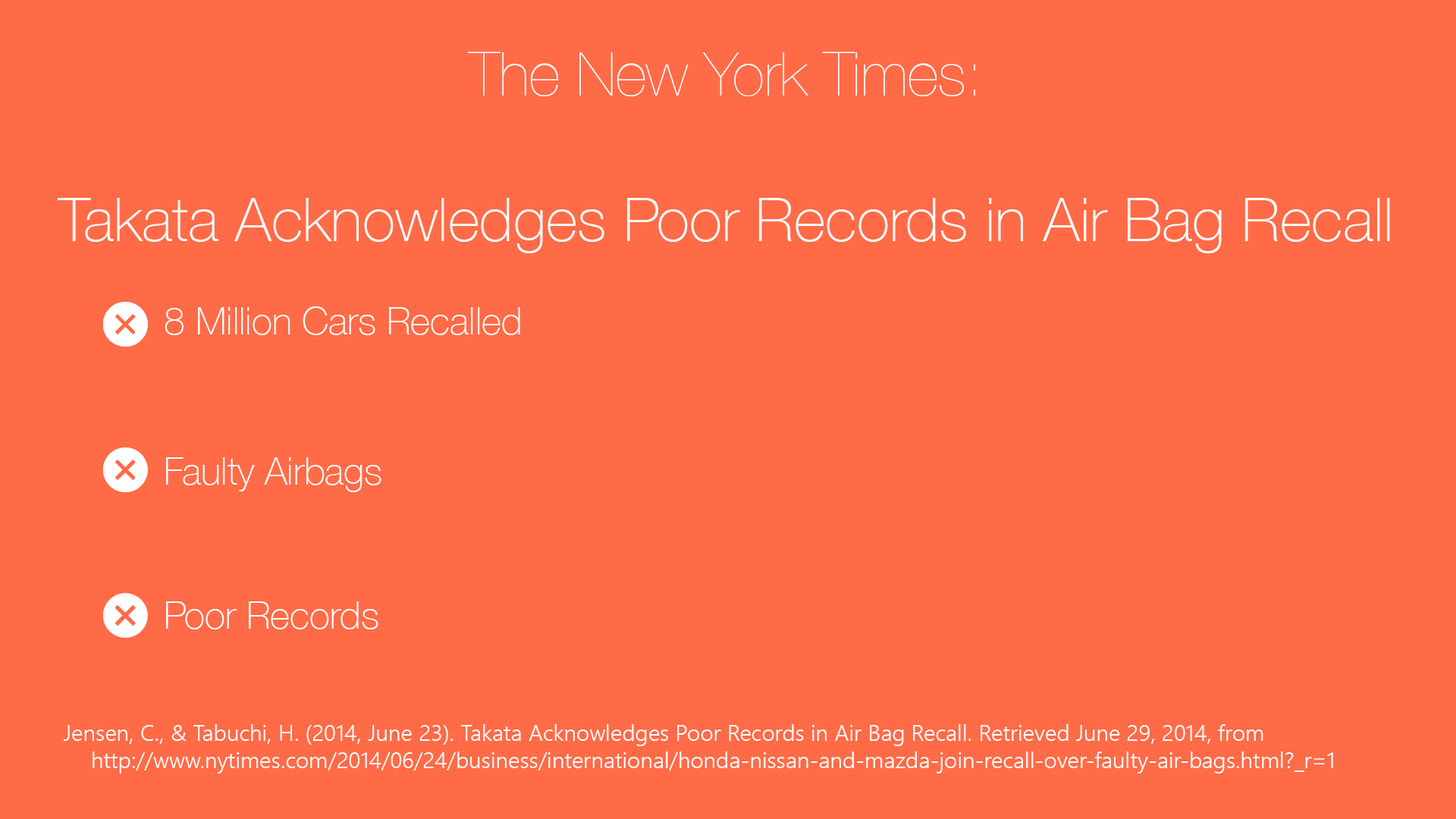
<style>
.page{position:relative;width:1456px;height:819px;background:#ff6b47}
.page>*{position:absolute;margin:0}
.t1{font:60.7px "HelveticaNeue-Thin";color:#ffffff}
.t2{font:43.2px "HelveticaNeue";color:#ffffff}
.t3{font:60.7px "HelveticaNeue-UltraLight";color:#ffffff}
.t4{font:37.9px "HelveticaNeue-Thin";color:#ffffff}
.t5{font:22.7px "SegoeUI-Semilight";color:#ffffff}
</style>
<div class="page">
<p class="t1" style="left:57px;top:52px;width:1333px;height:201px;text-align:center"><span class="t2"><br><br><br></span><span class="t3">The New York Times:<br><br></span>Takata Acknowledges Poor Records in Air Bag Recall</p>
<p class="t4" style="left:165px;top:306px;width:355px;height:29px">8 Million Cars Recalled</p>
<p class="t4" style="left:166px;top:457px;width:215px;height:35px">Faulty Airbags</p>
<p class="t4" style="left:166px;top:601px;width:212px;height:28px">Poor Records</p>
<p class="t5" style="left:64px;top:724px;width:1269px;height:49px">Jensen, C., &amp; Tabuchi, H. (2014, June 23). Takata Acknowledges Poor Records in Air Bag Recall. Retrieved June 29, 2014, from <br> http://www.nytimes.com/2014/06/24/business/international/honda-nissan-and-mazda-join-recall-over-faulty-air-bags.html?_r=1</p>
</div>
